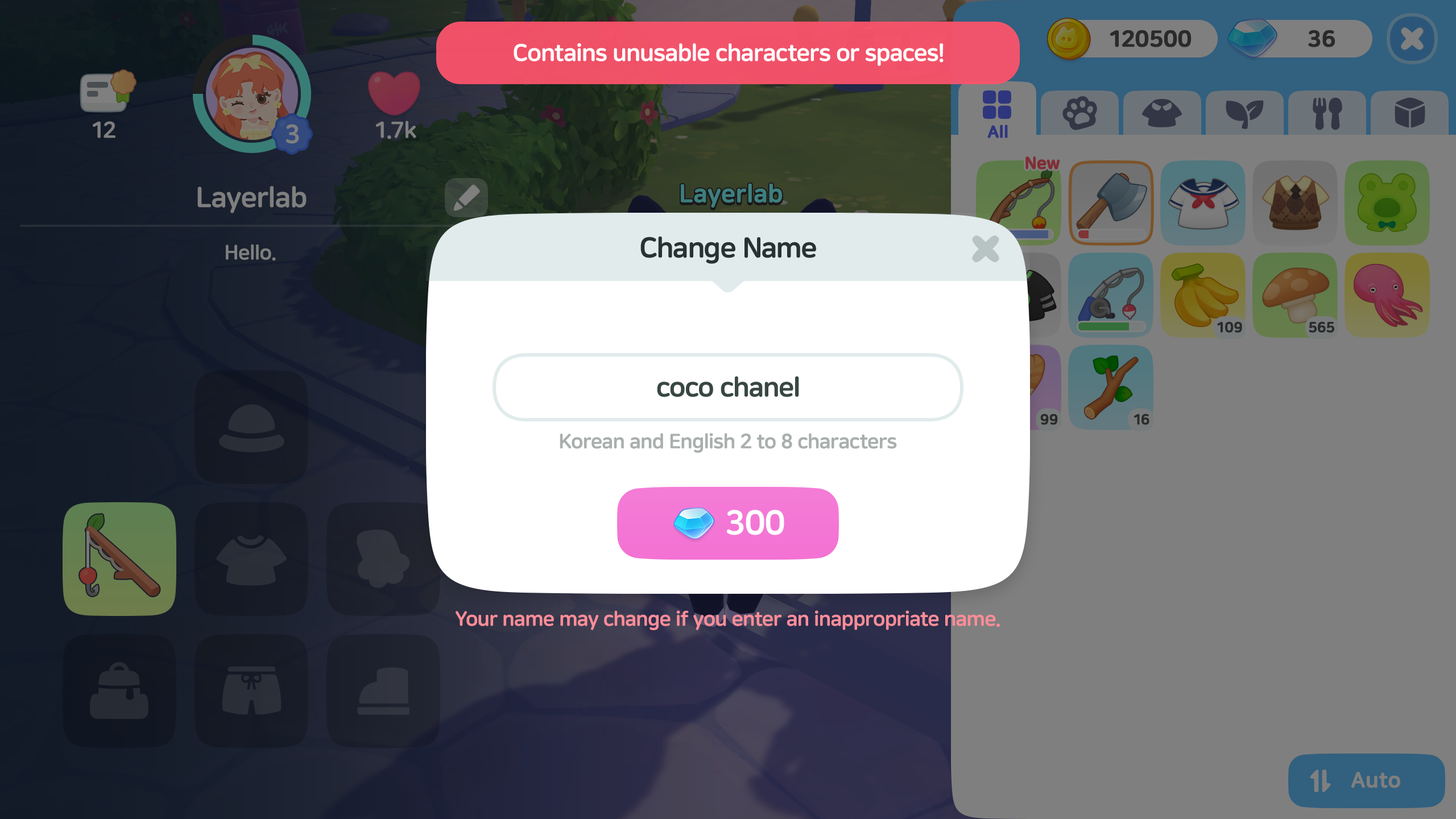
<style>
.page{position:relative;width:1456px;height:819px}
.page>*{position:absolute;margin:0}
.t1{font:23.9px "NanumSquareRoundEB";letter-spacing:-0.025em;color:#ffffff}
.t2{font:28.4px "NanumSquareRoundEB";letter-spacing:-0.025em;color:#283233}
.t3{font:27.3px "NanumSquareRoundEB";letter-spacing:-0.025em;color:#384742}
.t4{font:20.5px "NanumSquareRoundEB";letter-spacing:-0.025em;color:#a9afad}
.t5{font:34.1px "NanumSquareRoundEB";letter-spacing:-0.025em;color:#ffffff}
.t6{font:20.5px "NanumSquareRoundEB";letter-spacing:-0.025em;color:#ff8d98}
</style>
<div class="page">
<p class="t1" style="left:514px;top:43px;width:430px;height:23px">Contains unusable characters or spaces!</p>
<p class="t2" style="left:640px;top:236px;width:176px;height:28px">Change Name</p>
<p class="t3" style="left:657px;top:376px;width:142px;height:21px">coco chanel</p>
<p class="t4" style="left:560px;top:433px;width:337px;height:20px">Korean and English 2 to 8 characters</p>
<p class="t5" style="left:726px;top:510px;width:58px;height:25px">300</p>
<p class="t6" style="left:456px;top:610px;width:544px;height:20px">Your name may change if you enter an inappropriate name.</p>
</div>
